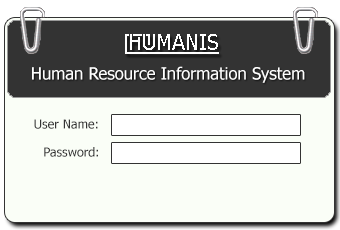
<style>
.page{position:relative;width:340px;height:230px;background:#fafef7}
.page>*{position:absolute;margin:0}
.t1{font:16.7px "Tahoma";color:#ffffff}
.t2{font:12.5px "Tahoma";color:#333333}
</style>
<div class="page">
<p class="t1" style="left:32px;top:66px;width:273px;height:17px">Human Resource Information System</p>
<p class="t2" style="left:34px;top:119px;width:64px;height:10px">User Name:</p>
<p class="t2" style="left:44px;top:147px;width:54px;height:10px">Password:</p>
</div>
